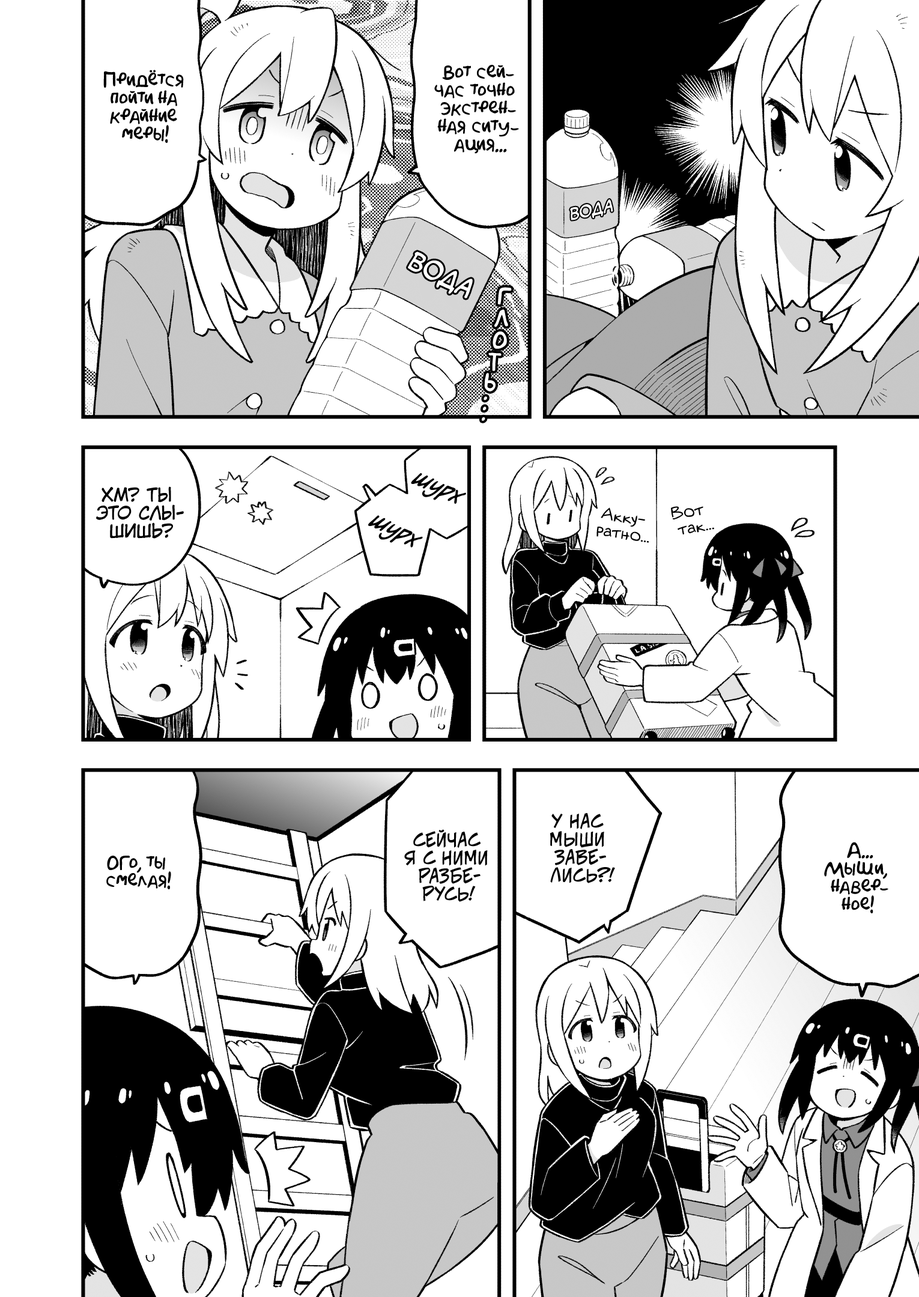
<style>
.page{position:relative;width:919px;height:1297px;background:#ffffff}
.page>*{position:absolute;margin:0}
.t1{font:18px "AkbarPlain";color:#000000}
.t2{font:16.2px "v_CCMonologous";color:#ffffff;text-transform:uppercase;scale:0.93 1}
.t3{font:25.2px "v_CCMonologous";color:#ffffff;text-transform:uppercase;scale:0.93 1}
.t4{font:21.6px "AkbarPlain";color:#ffffff;text-transform:uppercase;font-weight:bold}
.t5{font:18px "AkbarPlain";color:#ffffff;text-transform:uppercase;font-weight:bold}
.t6{font:25.2px "v_CCDearDiary";color:#000000}
.t7{font:18px "KuraiVoice2";color:#000000;text-transform:uppercase}
.t8{font:16.2px "v_Augie";color:#000000}
.t9{font:18px "v_CCJeffCampbell";color:#000000;text-transform:uppercase}
</style>
<div class="page">
<p class="t1" style="left:434px;top:65px;width:85px;height:89px;text-align:center">Вот сей-<br>час точно<br>экстрен-<br>ная ситу-<br>ация...</p>
<p class="t1" style="left:103px;top:70px;width:81px;height:73px;text-align:center">Придётся<br>пойти на<br>крайние<br>меры!</p>
<p class="t2" style="left:570px;top:199px;width:43px;height:21px;rotate:-12deg">вода</p>
<p class="t3" style="left:408px;top:252px;width:65px;height:47px;rotate:27deg">вода</p>
<p class="t4" style="left:497px;top:287px;width:15px;height:18px;rotate:7deg">г</p>
<p class="t4" style="left:494px;top:309px;width:14px;height:18px;rotate:1deg">л</p>
<p class="t4" style="left:493px;top:332px;width:14px;height:17px;rotate:4deg">о</p>
<p class="t4" style="left:488px;top:353px;width:14px;height:18px;rotate:2deg">т</p>
<p class="t4" style="left:484px;top:373px;width:12px;height:19px;rotate:14deg">ь</p>
<p class="t5" style="left:484px;top:396px;width:3px;height:5px">.</p>
<p class="t5" style="left:483px;top:407px;width:4px;height:4px">.</p>
<p class="t5" style="left:482px;top:417px;width:3px;height:4px">.</p>
<p class="t6" style="left:411px;top:473px;width:55px;height:31px;rotate:25deg">шурх</p>
<p class="t7" style="left:96px;top:487px;width:88px;height:52px;text-align:center">Хм? Ты<br>это слы-<br>шишь?</p>
<p class="t8" style="left:596px;top:508px;width:53px;height:35px;text-align:center;rotate:9deg">Акку-<br>ратно...</p>
<p class="t8" style="left:671px;top:506px;width:43px;height:29px;text-align:center;rotate:-9deg">Вот<br>так...</p>
<p class="t6" style="left:368px;top:515px;width:55px;height:33px;rotate:27deg">шурх</p>
<p class="t9" style="left:550px;top:813px;width:65px;height:71px;text-align:center">У нас<br>мыши<br>заве-<br>лись?!</p>
<p class="t9" style="left:404px;top:830px;width:84px;height:72px;text-align:center">Сейчас<br>я с ними<br>разбе-<br>русь!</p>
<p class="t1" style="left:824px;top:842px;width:64px;height:72px;text-align:center">А...<br>Мыши,<br>навер-<br>ное!</p>
<p class="t1" style="left:106px;top:856px;width:65px;height:34px;text-align:center">Ого, ты<br>смелая!</p>
</div>
